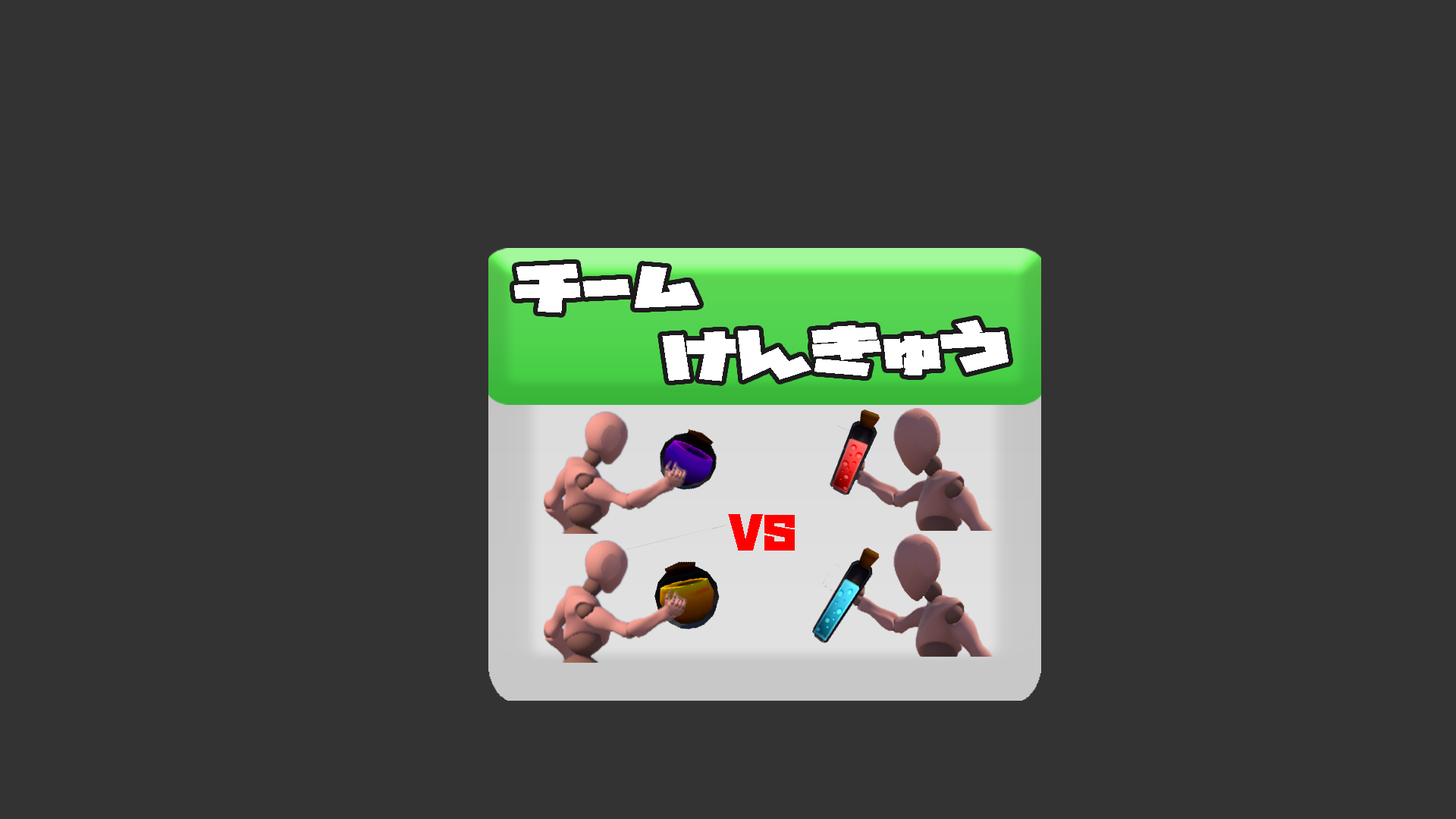
<style>
.page{position:relative;width:1456px;height:819px;background:#333333}
.page>*{position:absolute;margin:0}
.t1{font:54.6px "GN-KMBFont-UB-NewstyleKanaA";color:#ffffff;scale:1.49 1}
.t2{font:38.7px "GN-KMBFont-UB-NewstyleKanaA";color:#ff0000}
</style>
<div class="page">
<p class="t1" style="left:514px;top:264px;width:185px;height:49px;rotate:-1deg">チーム</p>
<p class="t1" style="left:662px;top:320px;width:347px;height:61px;rotate:-2deg">けんきゅう</p>
<p class="t2" style="left:728px;top:514px;width:67px;height:37px">VS</p>
</div>
